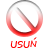
<style>
.page{position:relative;width:48px;height:48px;background:#ffffff}
.page>*{position:absolute;margin:0}
.t1{font:9px "SegoePrint";color:#fe0000}
</style>
<div class="page">
<p class="t1" style="left:10px;top:37px;width:27px;height:11px">USUŃ</p>
</div>
